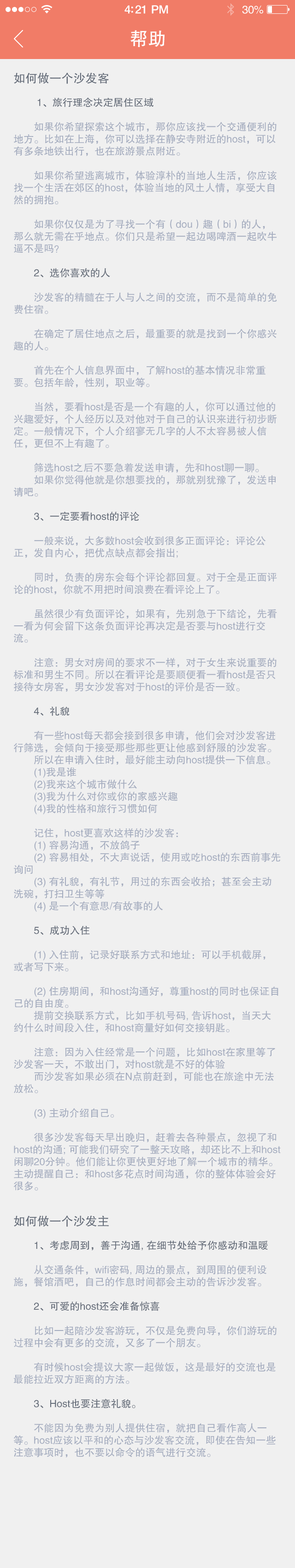
<style>
.page{position:relative;width:295px;height:1568px;background:#f0f0f0}
.page>*{position:absolute;margin:0}
.t1{font:11.5px "HelveticaNeue-Medium";letter-spacing:-0.02em;color:#ffffff}
.t2{font:11.1px "FZHTJW--GB1-0";letter-spacing:-0.02em;color:#ffffff}
.t3{font:18.4px "FZHTJW--GB1-0";color:#ffffff}
.t4{font:12px "FZHTJW--GB1-0";color:#626a77}
.t5{font:10.1px "FZHTJW--GB1-0";color:#a3abbe}
.t6{font:10.1px "FZHTJW--GB1-0";color:#626a77}
</style>
<div class="page">
<p class="t1" style="left:125px;top:5px;width:43px;height:9px">4:21 PM</p>
<p class="t2" style="left:242px;top:6px;width:21px;height:8px">30%</p>
<p class="t3" style="left:131px;top:30px;width:34px;height:17px">帮助</p>
<p class="t4" style="left:14px;top:72px;width:95px;height:12px">如何做一个沙发客</p>
<p class="t5" style="left:13px;top:97px;width:268px;height:1094px"><span class="t6">1、旅行理念决定居住区域<br></span><br>如果你希望探索这个城市，那你应该找一个交通便利的地方。比如在上海，你可以选择在静安寺附近的host，可以有多条地铁出行，也在旅游景点附近。<br><br>如果你希望逃离城市，体验淳朴的当地人生活，你应该找一个生活在郊区的host，体验当地的风土人情，享受大自然的拥抱。<br><br>如果你仅仅是为了寻找一个有（dou）趣（bi）的人，那么就无需在乎地点。你们只是希望一起边喝啤酒一起吹牛逼不是吗？<br><br><span class="t6">2、选你喜欢的人<br></span><br>沙发客的精髓在于人与人之间的交流，而不是简单的免费住宿。<br><br>在确定了居住地点之后，最重要的就是找到一个你感兴趣的人。<br><br>首先在个人信息界面中，了解host的基本情况非常重要。包括年龄，性别，职业等。<br><br>当然，要看host是否是一个有趣的人，你可以通过他的兴趣爱好，个人经历以及对他对于自己的认识来进行初步断定。一般情况下，个人介绍寥无几字的人不太容易被人信任，更但不上有趣了。<br><br>筛选host之后不要急着发送申请，先和host聊一聊。<br>如果你觉得他就是你想要找的，那就别犹豫了，发送申请吧。<br><br><span class="t6">3、一定要看host的评论<br></span><br>一般来说，大多数host会收到很多正面评论：评论公正，发自内心，把优点缺点都会指出;<br><br>同时，负责的房东会每个评论都回复。对于全是正面评论的host，你就不用把时间浪费在看评论上了。<br><br>虽然很少有负面评论，如果有，先别急于下结论，先看一看为何会留下这条负面评论再决定是否要与host进行交流。<br><br>注意：男女对房间的要求不一样，对于女生来说重要的标准和男生不同。所以在看评论是要顺便看一看host是否只接待女房客，男女沙发客对于host的评价是否一致。<br><br><span class="t6">4、礼貌<br></span><br>有一些host每天都会接到很多申请，他们会对沙发客进行筛选，会倾向于接受那些那些更让他感到舒服的沙发客。<br>所以在申请入住时，最好能主动向host提供一下信息。<br>(1)我是谁<br>(2)我来这个城市做什么<br>(3)我为什么对你或你的家感兴趣<br>(4)我的性格和旅行习惯如何<br><br>记住，host更喜欢这样的沙发客：<br>(1) 容易沟通，不放鸽子<br>(2) 容易相处，不大声说话，使用或吃host的东西前事先询问<br>(3) 有礼貌，有礼节，用过的东西会收拾；甚至会主动洗碗，打扫卫生等等<br>(4) 是一个有意思/有故事的人<br><br><span class="t6">5、成功入住<br></span><br>(1) 入住前，记录好联系方式和地址：可以手机截屏，或者写下来。<br><br>(2) 住房期间，和host沟通好，尊重host的同时也保证自己的自由度。<br>提前交换联系方式，比如手机号码, 告诉host，当天大约什么时间段入住，和host商量好如何交接钥匙。<br><br>注意：因为入住经常是一个问题，比如host在家里等了沙发客一天，不敢出门，对host就是不好的体验<br>而沙发客如果必须在N点前赶到，可能也在旅途中无法放松。<br><br>(3) 主动介绍自己。<br><br>很多沙发客每天早出晚归，赶着去各种景点，忽视了和host的沟通; 可能我们研究了一整天攻略，却还比不上和host闲聊20分钟。他们能让你更快更好地了解一个城市的精华。 主动提醒自己：和host多花点时间沟通，你的整体体验会好很多。</p>
<p class="t4" style="left:14px;top:1216px;width:95px;height:11px">如何做一个沙发主</p>
<p class="t5" style="left:13px;top:1241px;width:264px;height:216px"><span class="t6">1、考虑周到，善于沟通, 在细节处给予你感动和温暖<br></span><br>从交通条件，wifi密码, 周边的景点，到周围的便利设施，餐馆酒吧，自己的作息时间都会主动的告诉沙发客。<br><br><span class="t6">2、可爱的host还会准备惊喜<br></span><br>比如一起陪沙发客游玩，不仅是免费向导，你们游玩的过程中会有更多的交流，又多了一个朋友。<br><br>有时候host会提议大家一起做饭，这是最好的交流也是最能拉近双方距离的方法。<br><br><span class="t6">3、Host也要注意礼貌。<br></span><br>不能因为免费为别人提供住宿，就把自己看作高人一等。host应该以平和的心态与沙发客交流，即使在告知一些注意事项时，也不要以命令的语气进行交流。</p>
</div>
